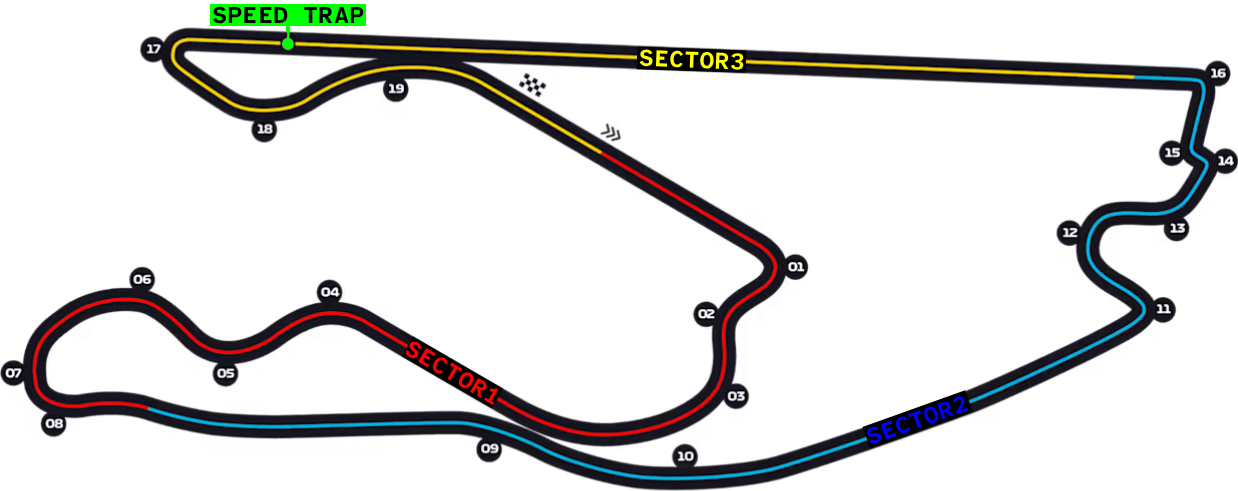
<style>
.page{position:relative;width:1238px;height:491px;background:#ffffff}
.page>*{position:absolute;margin:0}
.t1{font:24px "AtkinsonHyperlegibleMonoExtraLight-Bold";color:#000000}
.t2{font:24px "AtkinsonHyperlegibleMonoExtraLight-Bold";color:#ffff00}
.t3{font:24px "AtkinsonHyperlegibleMonoExtraLight-Bold";color:#ff0000}
.t4{font:24px "AtkinsonHyperlegibleMonoExtraLight-Bold";color:#0000ff}
</style>
<div class="page">
<p class="t1" style="left:213px;top:6px;width:151px;height:18px">SPEED TRAP</p>
<p class="t2" style="left:639px;top:49px;width:105px;height:21px;rotate:2deg">SECTOR3</p>
<p class="t3" style="left:405px;top:341px;width:94px;height:64px;rotate:30deg">SECTOR1</p>
<p class="t4" style="left:866px;top:396px;width:103px;height:48px;rotate:-19deg">SECTOR2</p>
</div>
